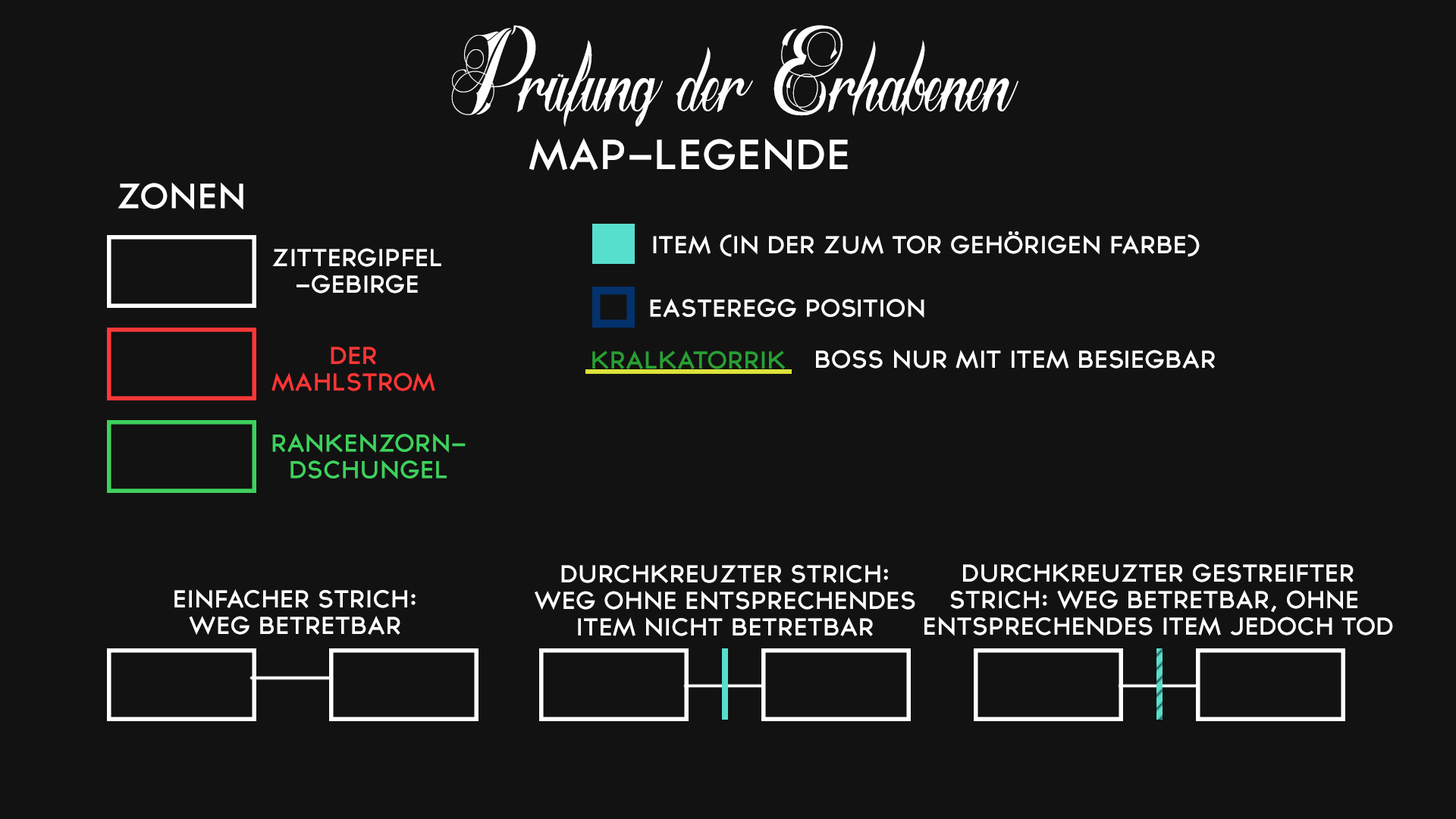
<style>
.page{position:relative;width:1456px;height:819px;background:#121212}
.page>*{position:absolute;margin:0}
.t1{font:123.3px "RadicalBeat";color:#ffffff}
.t2{font:37.9px "TYPOGRAPHPRO-SemiBold";color:#ffffff}
.t3{font:31.6px "TYPOGRAPHPRO-SemiBold";color:#ffffff}
.t4{font:22.1px "TYPOGRAPHPRO-SemiBold";color:#ffffff}
.t5{font:22.1px "TYPOGRAPHPRO-SemiBold";color:#ff3535}
.t6{font:22.1px "TYPOGRAPHPRO-SemiBold";color:#289f33}
.t7{font:22.1px "TYPOGRAPHPRO-SemiBold";color:#3ed15d}
</style>
<div class="page">
<p class="t1" style="left:451px;top:25px;width:567px;height:102px">Prüfung der Erhabenen</p>
<p class="t2" style="left:529px;top:138px;width:319px;height:33px">MAP-LEGENDE</p>
<p class="t3" style="left:118px;top:182px;width:125px;height:28px">ZONEN</p>
<p class="t4" style="left:653px;top:231px;width:547px;height:26px">ITEM (IN DER ZUM TOR GEHÖRIGEN FARBE)</p>
<p class="t4" style="left:272px;top:248px;width:169px;height:45px;text-align:center">ZITTERGIPFEL<br>-GEBIRGE</p>
<p class="t4" style="left:650px;top:298px;width:274px;height:20px">EASTEREGG POSITION</p>
<p class="t5" style="left:271px;top:347px;width:164px;height:44px;text-align:center">DER<br>MAHLSTROM</p>
<p class="t6" style="left:592px;top:350px;width:193px;height:19px">KRALKATORRIK</p>
<p class="t4" style="left:816px;top:350px;width:399px;height:19px">BOSS NUR MIT ITEM BESIEGBAR</p>
<p class="t7" style="left:272px;top:433px;width:194px;height:46px;text-align:center">RANKENZORN-<br>DSCHUNGEL</p>
<p class="t4" style="left:535px;top:564px;width:380px;height:73px;text-align:center">DURCHKREUZTER STRICH:<br>WEG OHNE ENTSPRECHENDES<br>ITEM NICHT BETRETBAR</p>
<p class="t4" style="left:924px;top:563px;width:469px;height:73px;text-align:center">DURCHKREUZTER GESTREIFTER<br>STRICH: WEG BETRETBAR, OHNE <br>ENTSPRECHENDES ITEM JEDOCH TOD</p>
<p class="t4" style="left:174px;top:589px;width:242px;height:46px;text-align:center">EINFACHER STRICH:<br>WEG BETRETBAR</p>
</div>
